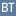
<style>
.page{position:relative;width:16px;height:16px;background:#5d7ba0}
.page>*{position:absolute;margin:0}
.t1{font:19px "MyriadPro-Regular";letter-spacing:-0.02em;color:#ffffff;scale:0.8 1}
</style>
<div class="page">
<p class="t1" style="left:2px;top:2px;width:13px;height:10px">вт</p>
</div>
